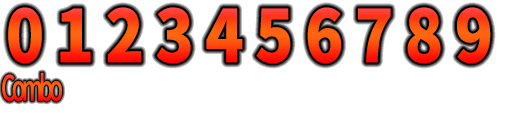
<style>
.page{position:relative;width:526px;height:135px;background:#ffffff}
.page>*{position:absolute;margin:0}
.t1{font:72px "SourceHanSansJP-Heavy";letter-spacing:0.18em;scale:0.88 1}
.t2{font:34.8px "SourceHanSansJP-Medium";letter-spacing:-0.165em;scale:0.64 1}
</style>
<div class="page">
<p class="t1" style="left:8px;top:7px;width:483px;height:57px">0123456789</p>
<p class="t2" style="left:2px;top:72px;width:60px;height:30px">Combo</p>
</div>
